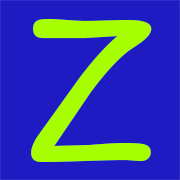
<style>
.page{position:relative;width:180px;height:180px;background:#1f1bc3}
.page>*{position:absolute;margin:0}
.t1{font:187.5px "ComicSansMS";color:#a7fe00}
</style>
<div class="page">
<p class="t1" style="left:31px;top:19px;width:121px;height:143px">Z</p>
</div>
